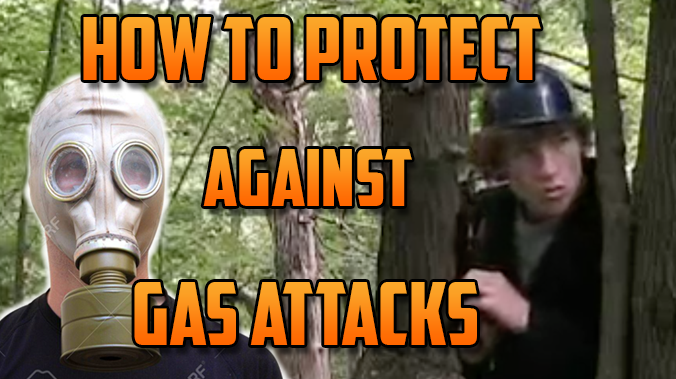
<style>
.page{position:relative;width:676px;height:379px}
.page>*{position:absolute;margin:0}
.t1{font:87.3px "AmericanCaptain"}
.t2{font:79.3px "AmericanCaptain"}
</style>
<div class="page">
<p class="t1" style="left:83px;top:17px;width:458px;height:63px">how to protect</p>
<p class="t2" style="left:203px;top:149px;width:209px;height:57px">against</p>
<p class="t1" style="left:134px;top:282px;width:343px;height:63px">Gas attacks</p>
</div>
